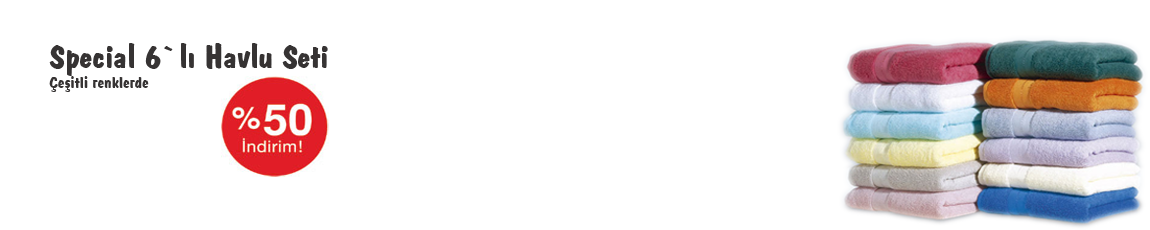
<style>
.page{position:relative;width:1150px;height:230px;background:#ffffff}
.page>*{position:absolute;margin:0}
.t1{font:33.1px "DomBoldBT-Regular";color:#363333;scale:1.07 1}
.t2{font:16.6px "DomBoldBT-Regular";color:#363333;scale:1.07 1}
</style>
<div class="page">
<p class="t1" style="left:49px;top:43px;width:279px;height:49px">Special 6`lı Havlu Seti<span class="t2"><br>Çeşitli renklerde</span></p>
</div>
